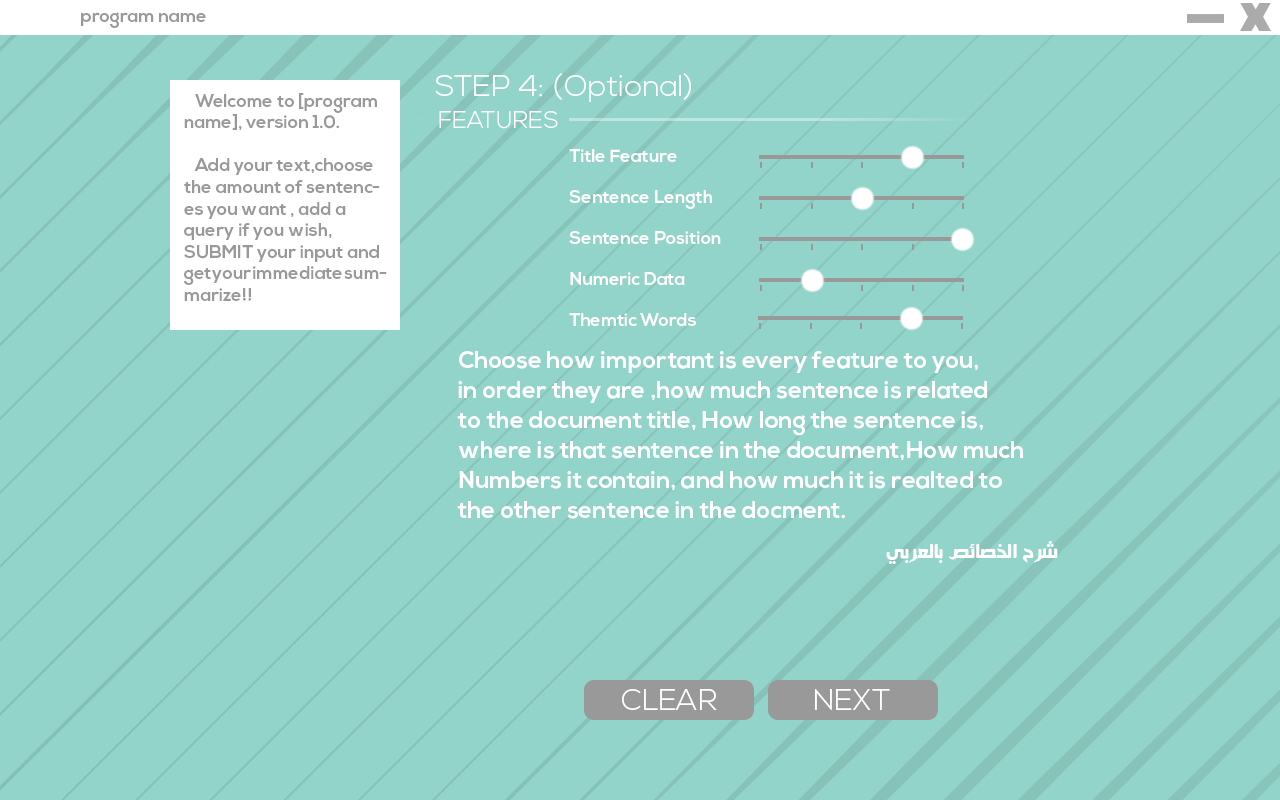
<style>
.page{position:relative;width:1280px;height:800px;background:#92d4ca}
.page>*{position:absolute;margin:0}
.t1{font:18px "NexaBold";color:#999999}
.t2{font:30px "NexaLight";color:#ffffff}
.t3{font:24px "NexaLight";color:#ffffff;text-transform:uppercase}
.t4{font:18px "NexaBold";color:#fffcfc}
.t5{font:24px/30px "NexaBold";color:#ffffff}
.t6{font:24px "HacenSamra";color:#ffffff}
.t7{font:30px "NexaLight";color:#ffffff;text-transform:uppercase}
</style>
<div class="page">
<p class="t1" style="left:81px;top:12px;width:125px;height:16px">program name</p>
<p class="t2" style="left:435px;top:73px;width:256px;height:29px">STEP 4: (Optional)</p>
<p class="t1" style="left:184px;top:93px;width:203px;height:208px">Welcome to [program name], version 1.0.<br><br>   Add your text,choose the amount of sentences you want , add a query if you wish, SUBMIT your input and get your immediate summarize!!</p>
<p class="t3" style="left:439px;top:111px;width:119px;height:18px">Features</p>
<p class="t4" style="left:569px;top:149px;width:108px;height:13px">Title Feature</p>
<p class="t4" style="left:569px;top:190px;width:143px;height:19px">Sentence Length</p>
<p class="t4" style="left:569px;top:231px;width:152px;height:13px">Sentence Position</p>
<p class="t4" style="left:570px;top:272px;width:115px;height:13px">Numeric Data</p>
<p class="t4" style="left:569px;top:313px;width:127px;height:13px">Themtic Words</p>
<p class="t5" style="left:457px;top:351px;width:566px;height:168px">Choose how important is every feature to you,<br>in order they are ,how much sentence is related<br>to the document title, How long the sentence is,<br>where is that sentence in the document,How much<br>Numbers it contain, and how much it is realted to<br>the other sentence in the docment.</p>
<p class="t6" style="left:886px;top:541px;width:172px;height:23px">شرح الخصائص بالعربي</p>
<p class="t7" style="left:622px;top:689px;width:95px;height:21px">Clear</p>
<p class="t7" style="left:815px;top:689px;width:75px;height:21px">Next</p>
</div>
